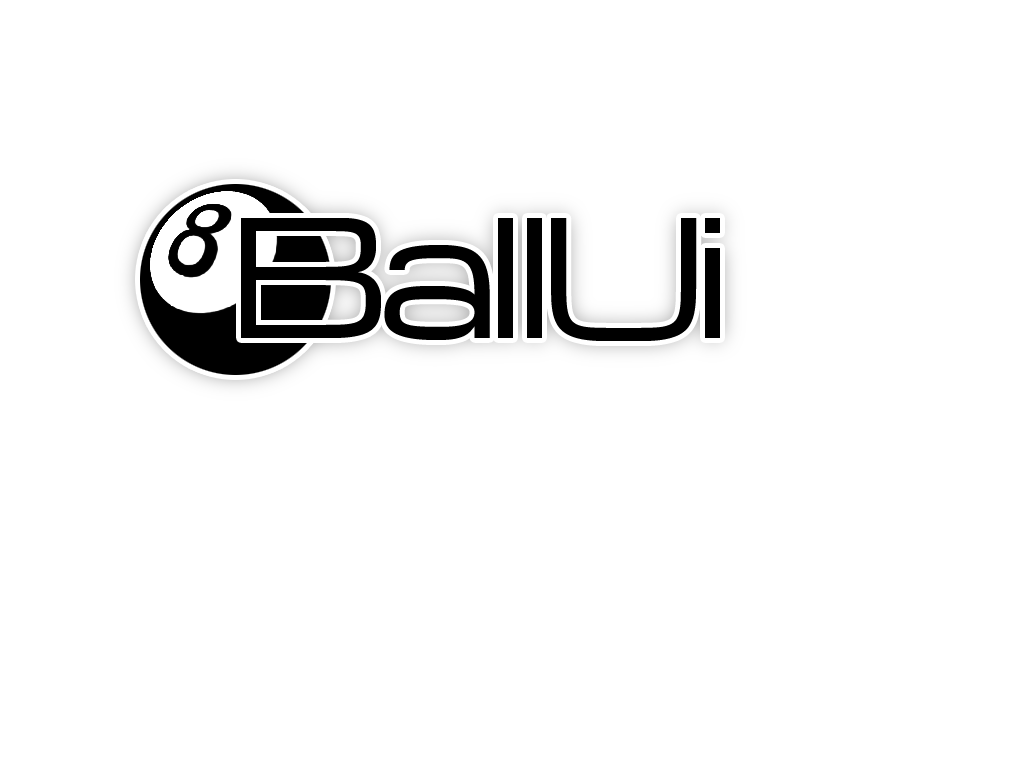
<style>
.page{position:relative;width:1024px;height:768px;background:#ffffff}
.page>*{position:absolute;margin:0}
.t1{font:160px "Michroma";letter-spacing:-0.1em;color:#000000}
</style>
<div class="page">
<p class="t1" style="left:241px;top:218px;width:479px;height:123px">BallUi</p>
</div>
